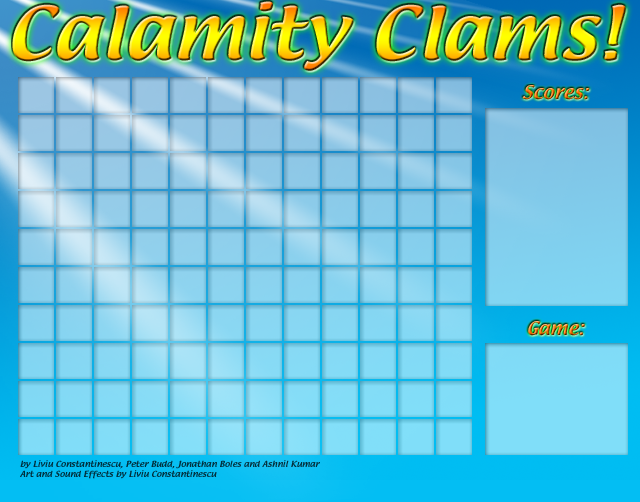
<style>
.page{position:relative;width:640px;height:502px}
.page>*{position:absolute;margin:0}
.t1{font:64.8px "TextileRegular";scale:1.11 1}
.t2{font:16.2px/59px "TextileRegular";scale:1.11 1}
.t3{font:7.2px/59px "TextileRegular";color:#01303d;scale:1.11 1}
.t4{font:7.2px "TextileRegular";color:#01303d;scale:1.11 1}
</style>
<div class="page">
<p class="t1" style="left:12px;top:1px;width:614px;height:70px">Calamity Clams!</p>
<p class="t2" style="left:522px;top:85px;width:68px;height:251px;text-align:center">Scores:<br><br><br><br>Game:</p>
<p class="t3" style="left:20px;top:460px;width:300px;height:19px">by Liviu Constantinescu, Peter Budd, Jonathan Boles and Ashnil Kumar<br><span class="t4">Art and Sound Effects by Liviu Constantinescu</span></p>
</div>
